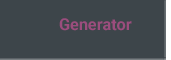
<style>
.page{position:relative;width:171px;height:60px;background:#3d454a}
.page>*{position:absolute;margin:0}
.t1{font:16.3px/14.3px "Roboto-Bold";color:#9b4d7d}
.t2{font:16.3px/14.3px "Roboto-Bold";color:#3d454a}
</style>
<div class="page">
<p class="t1" style="left:59px;top:18px;width:73px;height:28px">Generator<br><span class="t2">CMS</span></p>
</div>
